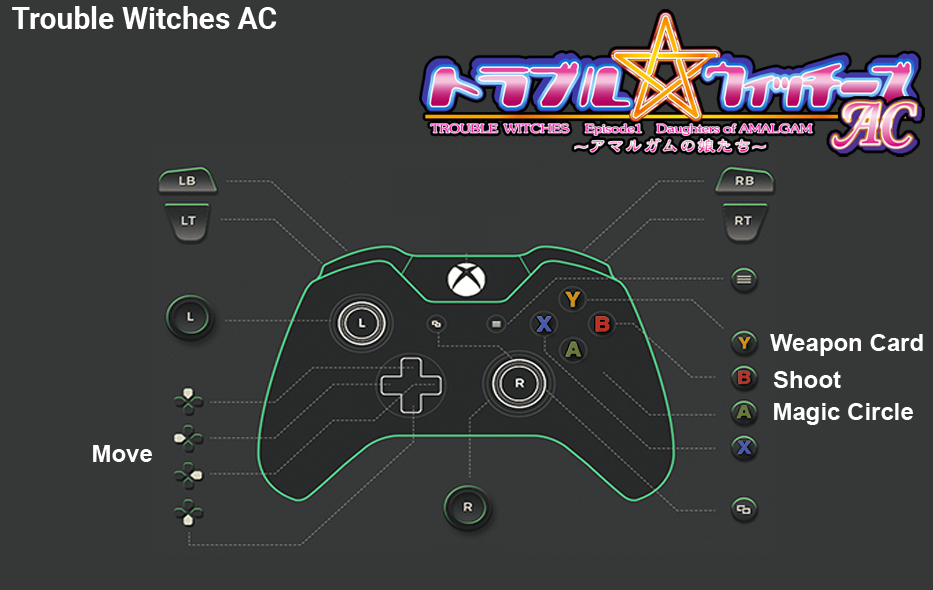
<style>
.page{position:relative;width:933px;height:590px;background:#363838}
.page>*{position:absolute;margin:0}
.t1{font:30px "Roboto-Bold";color:#ffffff}
.t2{font:24px "Arial-BoldMT";color:#fefefe}
</style>
<div class="page">
<p class="t1" style="left:12px;top:6px;width:265px;height:23px">Trouble Witches AC</p>
<p class="t2" style="left:770px;top:334px;width:153px;height:22px">Weapon Card</p>
<p class="t2" style="left:773px;top:371px;width:68px;height:17px">Shoot</p>
<p class="t2" style="left:774px;top:403px;width:139px;height:22px">Magic Circle</p>
<p class="t2" style="left:93px;top:445px;width:59px;height:17px">Move</p>
</div>
